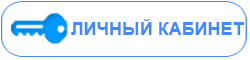
<style>
.page{position:relative;width:250px;height:60px;background:#ffffff}
.page>*{position:absolute;margin:0}
.t1{font:18px "Arial-BoldMT";color:#4389fc}
</style>
<div class="page">
<p class="t1" style="left:71px;top:19px;width:173px;height:16px">ЛИЧНЫЙ КАБИНЕТ</p>
</div>
